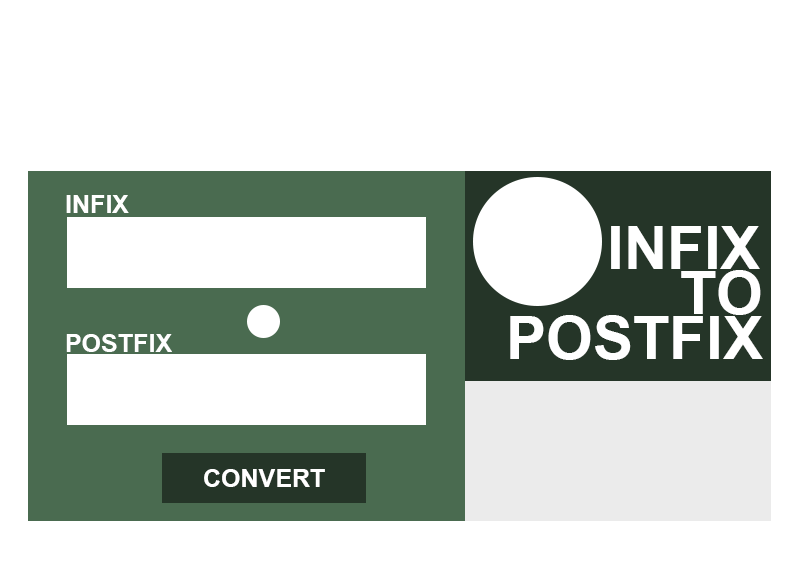
<style>
.page{position:relative;width:792px;height:576px;background:#ffffff}
.page>*{position:absolute;margin:0}
.t1{font:25px "Arial-BoldMT";color:#ffffff}
.t2{font:60px "Arial-BoldMT";color:#ffffff}
</style>
<div class="page">
<p class="t1" style="left:66px;top:195px;width:63px;height:18px">INFIX</p>
<p class="t2" style="left:611px;top:226px;width:149px;height:43px">INFIX</p>
<p class="t2" style="left:681px;top:270px;width:80px;height:45px">TO</p>
<p class="t2" style="left:510px;top:315px;width:253px;height:45px">POSTFIX</p>
<p class="t1" style="left:66px;top:334px;width:106px;height:18px">POSTFIX</p>
<p class="t1" style="left:204px;top:469px;width:121px;height:18px">CONVERT</p>
</div>
